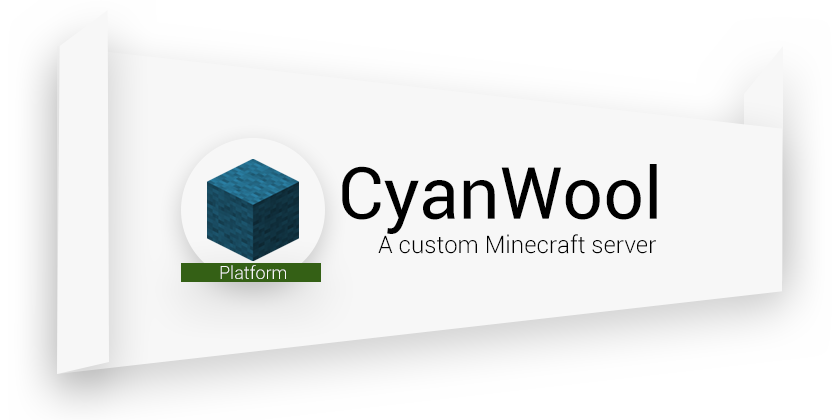
<style>
.page{position:relative;width:840px;height:420px;background:#f7f7f7}
.page>*{position:absolute;margin:0}
.t1{font:72px "Roboto-Regular";color:#000000}
.t2{font:24px "Roboto-Light";color:#000000}
.t3{font:18px "Roboto-Light";color:#f8f8f8}
</style>
<div class="page">
<p class="t1" style="left:342px;top:164px;width:315px;height:70px">CyanWool</p>
<p class="t2" style="left:378px;top:234px;width:278px;height:20px">A custom Minecraft server</p>
<p class="t3" style="left:220px;top:265px;width:66px;height:15px">Platform</p>
</div>
